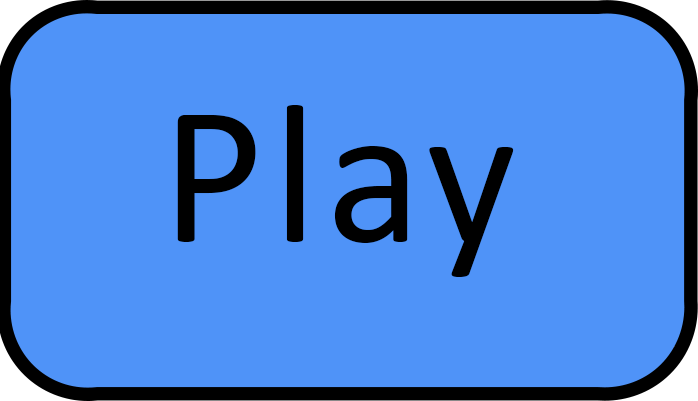
<style>
.page{position:relative;width:698px;height:401px;background:#4f93f8}
.page>*{position:absolute;margin:0}
.t1{font:200px "Calibri";letter-spacing:0.04em;color:#000000}
</style>
<div class="page">
<p class="t1" style="left:177px;top:105px;width:337px;height:172px">Play</p>
</div>
